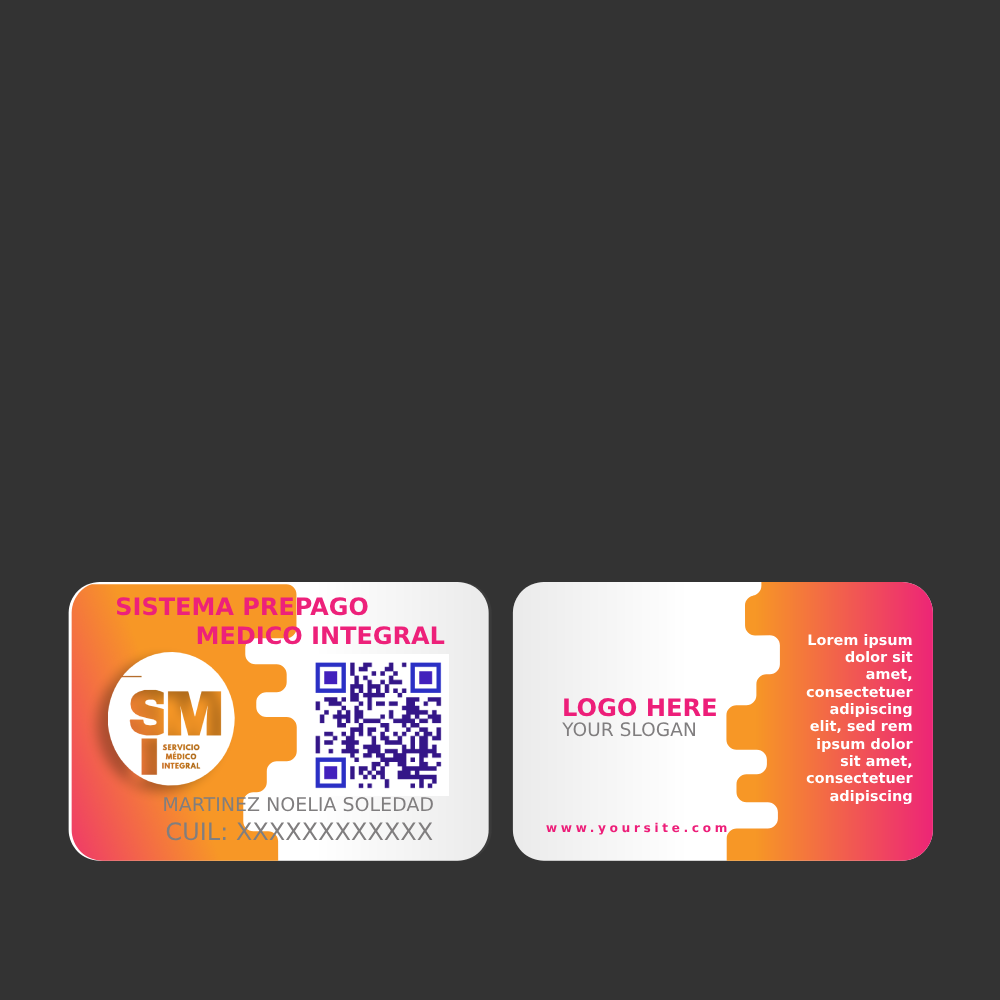
<style>
.page{position:relative;width:1000px;height:1000px;background:#333333}
.page>*{position:absolute;margin:0}
.t1{font:24px "Gilroy-ExtraBold";color:#ed217a;text-transform:uppercase}
.t2{font:14.4px "Gilroy-ExtraBold";color:#ffffff}
.t3{font:24.2px "Gilroy-ExtraBold";color:#ed1e79;text-transform:uppercase}
.t4{font:18.6px "Gilroy-Light";color:#807e7f;text-transform:uppercase}
.t5{font:19px "Gilroy-Light";color:#807e7f;text-transform:uppercase}
.t6{font:24px "Gilroy-Light";color:#807e7f;text-transform:uppercase}
.t7{font:12.2px "Gilroy-ExtraBold";letter-spacing:0.3em;color:#ed1e79}
</style>
<div class="page">
<p class="t1" style="left:116px;top:597px;width:329px;height:48px">Sistema PREPAGO<br>  MEDICO INTEGRAL</p>
<p class="t2" style="left:806px;top:634px;width:107px;height:171px;text-align:right">Lorem ipsum dolor sit amet, consectetuer adipiscing elit, sed rem ipsum dolor sit amet, consectetuer adipiscing elit, sed diam nonummy nibh</p>
<p class="t3" style="left:564px;top:698px;width:152px;height:19px">logo here</p>
<p class="t4" style="left:562px;top:722px;width:133px;height:15px">your slogan</p>
<p class="t5" style="left:164px;top:796px;width:269px;height:16px">MArtinez NOELIA SOledad</p>
<p class="t6" style="left:166px;top:822px;width:267px;height:19px">CUIL: XXXXXXXXXXXX</p>
<p class="t7" style="left:546px;top:822px;width:181px;height:13px">www.yoursite.com</p>
</div>
